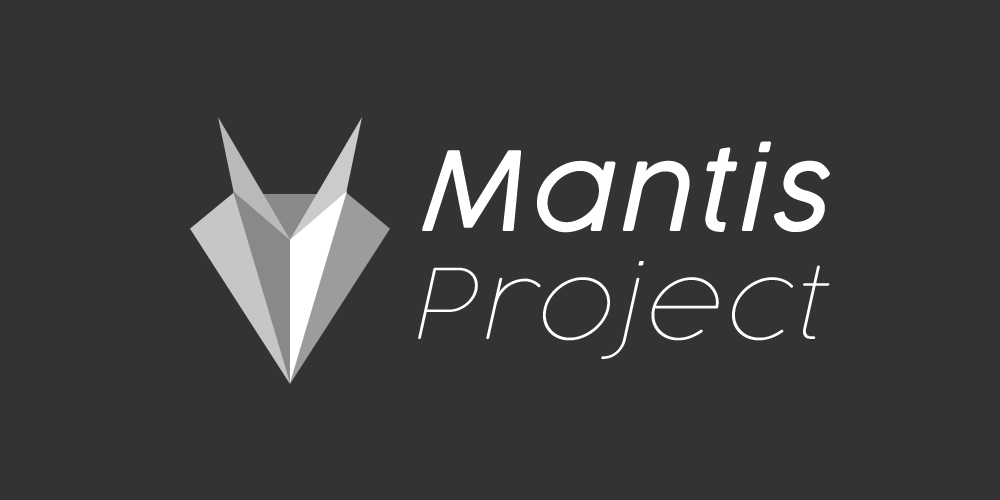
<style>
.page{position:relative;width:1000px;height:500px;background:#333333}
.page>*{position:absolute;margin:0}
.t1{font:108.6px "CocogoosePro-LightItalic";letter-spacing:0.06em;color:#ffffff}
.t2{font:95.8px "CocogoosePro-ThinItalic";letter-spacing:0.06em;color:#ffffff;scale:1.04 1}
</style>
<div class="page">
<p class="t1" style="left:422px;top:141px;width:408px;height:92px">Mantis</p>
<p class="t2" style="left:418px;top:261px;width:412px;height:98px">Project</p>
</div>
